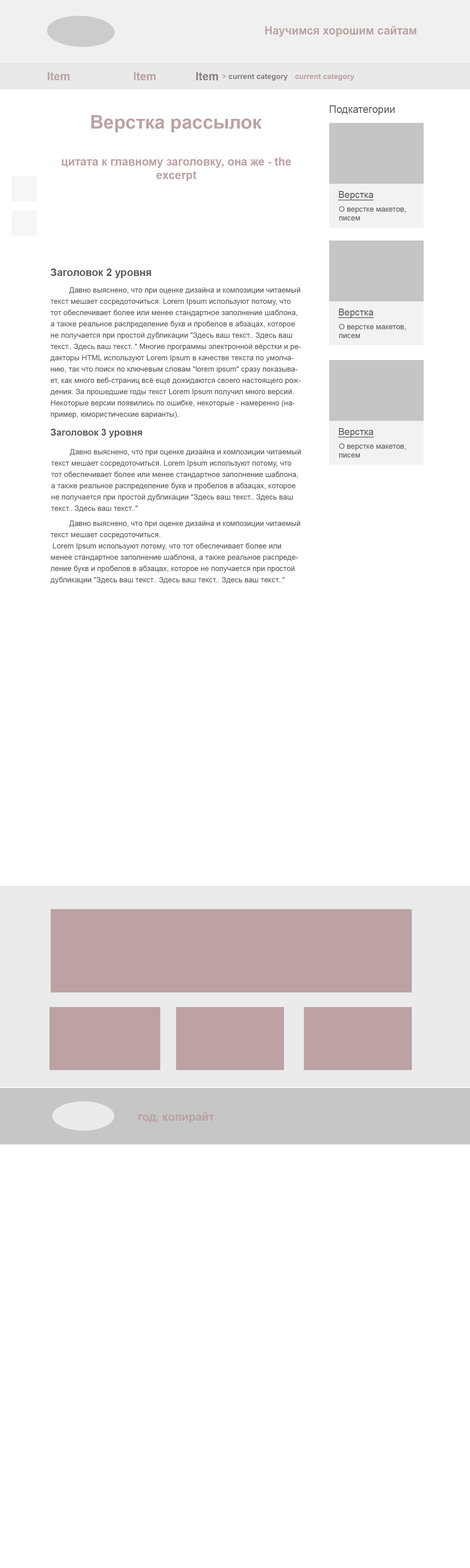
<style>
.page{position:relative;width:470px;height:1568px;background:#ffffff}
.page>*{position:absolute;margin:0}
.t1{font:11.3px "Arial-BoldMT";color:#bca2a2}
.t2{font:11.3px "Arial-BoldMT";color:#888080}
.t3{font:7.5px "Arial-BoldMT";color:#888080}
.t4{font:7.5px "Arial-BoldMT";color:#bca2a2}
.t5{font:10.3px "ArialMT";color:#5d5d5d}
.t6{font:18.8px "Arial-BoldMT";color:#bca2a2}
.t7{font:9.4px "ArialMT";color:#5d5d5d;text-decoration:underline}
.t8{font:7.5px "ArialMT";color:#5d5d5d}
.t9{font:10.3px "Arial-BoldMT";color:#5d5d5d}
.t10{font:7.5px/11.3px "ArialMT";color:#5d5d5d}
.t11{font:9.4px "Arial-BoldMT";color:#5d5d5d}
</style>
<div class="page">
<p class="t1" style="left:265px;top:26px;width:152px;height:11px">Научимся хорошим сайтам</p>
<p class="t1" style="left:48px;top:72px;width:22px;height:8px">Item</p>
<p class="t1" style="left:134px;top:72px;width:22px;height:8px">Item</p>
<p class="t2" style="left:196px;top:72px;width:22px;height:8px">Item</p>
<p class="t3" style="left:222px;top:74px;width:66px;height:7px"><span class="t4">&gt; </span>current category</p>
<p class="t4" style="left:295px;top:74px;width:60px;height:7px">current category</p>
<p class="t5" style="left:330px;top:105px;width:65px;height:10px">Подкатегории</p>
<p class="t6" style="left:91px;top:115px;width:171px;height:17px">Верстка рассылок</p>
<p class="t1" style="left:62px;top:157px;width:229px;height:24px;text-align:center">цитата к главному заголовку, она же - the excerpt</p>
<p class="t7" style="left:338px;top:191px;width:36px;height:9px">Верстка</p>
<p class="t8" style="left:339px;top:206px;width:67px;height:14px">О верстке макетов, писем</p>
<p class="t9" style="left:50px;top:268px;width:101px;height:10px">Заголовок 2 уровня</p>
<p class="t10" style="left:50px;top:287px;width:251px;height:131px">Давно выяснено, что при оценке дизайна и композиции читаемый текст мешает сосредоточиться. Lorem Ipsum используют потому, что тот обеспечивает более или менее стандартное заполнение шаблона, а также реальное распределение букв и пробелов в абзацах, которое не получается при простой дубликации "Здесь ваш текст.. Здесь ваш текст.. Здесь ваш текст.." Многие программы электронной вёрстки и редакторы HTML используют Lorem Ipsum в качестве текста по умолчанию, так что поиск по ключевым словам "lorem ipsum" сразу показывает, как много веб-страниц всё ещё дожидаются своего настоящего рождения. За прошедшие годы текст Lorem Ipsum получил много версий. Некоторые версии появились по ошибке, некоторые - намеренно (например, юмористические варианты).</p>
<p class="t7" style="left:338px;top:309px;width:36px;height:9px">Верстка</p>
<p class="t8" style="left:339px;top:324px;width:67px;height:14px">О верстке макетов, писем</p>
<p class="t11" style="left:50px;top:429px;width:92px;height:8px">Заголовок 3 уровня</p>
<p class="t7" style="left:338px;top:428px;width:36px;height:9px">Верстка</p>
<p class="t10" style="left:51px;top:449px;width:250px;height:63px">Давно выяснено, что при оценке дизайна и композиции читаемый текст мешает сосредоточиться. Lorem Ipsum используют потому, что тот обеспечивает более или менее стандартное заполнение шаблона, а также реальное распределение букв и пробелов в абзацах, которое не получается при простой дубликации "Здесь ваш текст.. Здесь ваш текст.. Здесь ваш текст.."</p>
<p class="t8" style="left:339px;top:443px;width:67px;height:15px">О верстке макетов, писем</p>
<p class="t10" style="left:50px;top:521px;width:250px;height:63px">Давно выяснено, что при оценке дизайна и композиции читаемый текст мешает сосредоточиться. <br> Lorem Ipsum используют потому, что тот обеспечивает более или менее стандартное заполнение шаблона, а также реальное распределение букв и пробелов в абзацах, которое не получается при простой дубликации "Здесь ваш текст.. Здесь ваш текст.. Здесь ваш текст.."</p>
<p class="t1" style="left:138px;top:1112px;width:77px;height:11px">год, копирайт</p>
</div>
